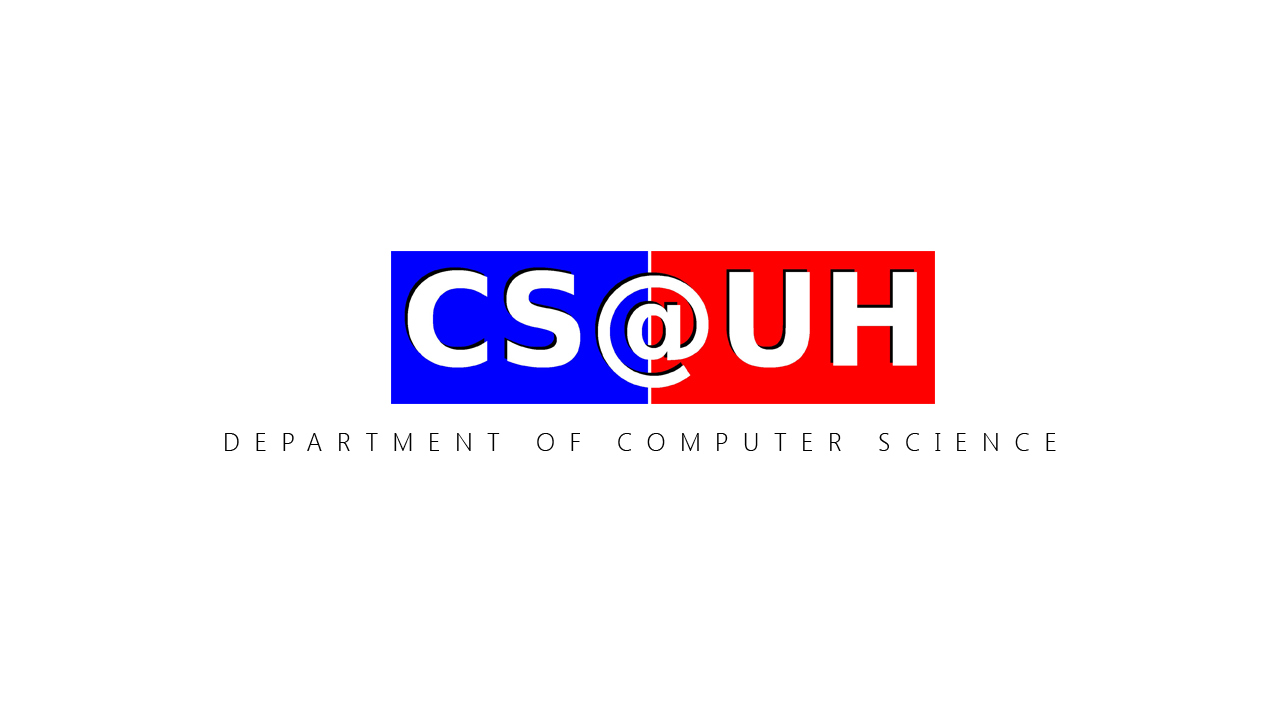
<style>
.page{position:relative;width:1280px;height:720px;background:#ffffff}
.page>*{position:absolute;margin:0}
.t1{font:25px "SegoeUI-Light";letter-spacing:0.58em;color:#000000}
</style>
<div class="page">
<p class="t1" style="left:225px;top:433px;width:831px;height:18px">DEPARTMENT OF COMPUTER SCIENCE</p>
</div>
